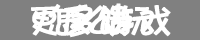
<style>
.page{position:relative;width:200px;height:40px;background:#808080}
.page>*{position:absolute;margin:0}
.t1{font:36px "Jkaton";color:#ffffff;font-weight:bold}
</style>
<div class="page">
<p class="t1" style="left:31px;top:4px;width:140px;height:34px">更多游戏</p>
<p class="t1" style="left:47px;top:4px;width:106px;height:32px">怎么玩</p>
<p class="t1" style="left:63px;top:3px;width:66px;height:34px">反馈</p>
</div>
